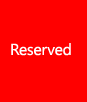
<style>
.page{position:relative;width:87px;height:102px;background:#ff0000}
.page>*{position:absolute;margin:0}
.t1{font:16px "SegoeUI";letter-spacing:-0.02em;color:#ffffff}
</style>
<div class="page">
<p class="t1" style="left:11px;top:43px;width:60px;height:13px">Reserved</p>
</div>
